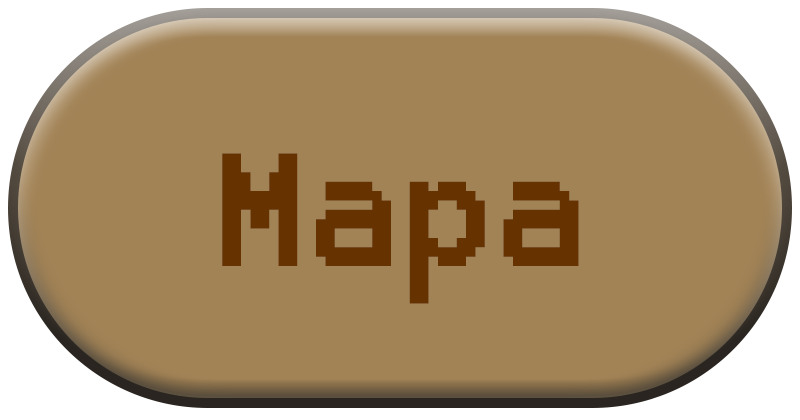
<style>
.page{position:relative;width:800px;height:420px;background:#a28356}
.page>*{position:absolute;margin:0}
.t1{font:200px "8514oem";color:#663300}
</style>
<div class="page">
<p class="t1" style="left:222px;top:153px;width:357px;height:151px">Mapa</p>
</div>
